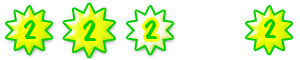
<style>
.page{position:relative;width:300px;height:60px;background:#ffffff}
.page>*{position:absolute;margin:0}
.t1{font:30px "DomCasualBT-Regular";letter-spacing:0.03em;color:#00cc00}
.t2{font:33px "DomCasualBT-Regular";letter-spacing:0.03em;color:#00cc00}
</style>
<div class="page">
<p class="t1" style="left:23px;top:20px;width:13px;height:19px">2</p>
<p class="t2" style="left:83px;top:20px;width:14px;height:21px">2</p>
<p class="t1" style="left:144px;top:20px;width:13px;height:19px">2</p>
<p class="t1" style="left:263px;top:19px;width:13px;height:19px">2</p>
</div>
